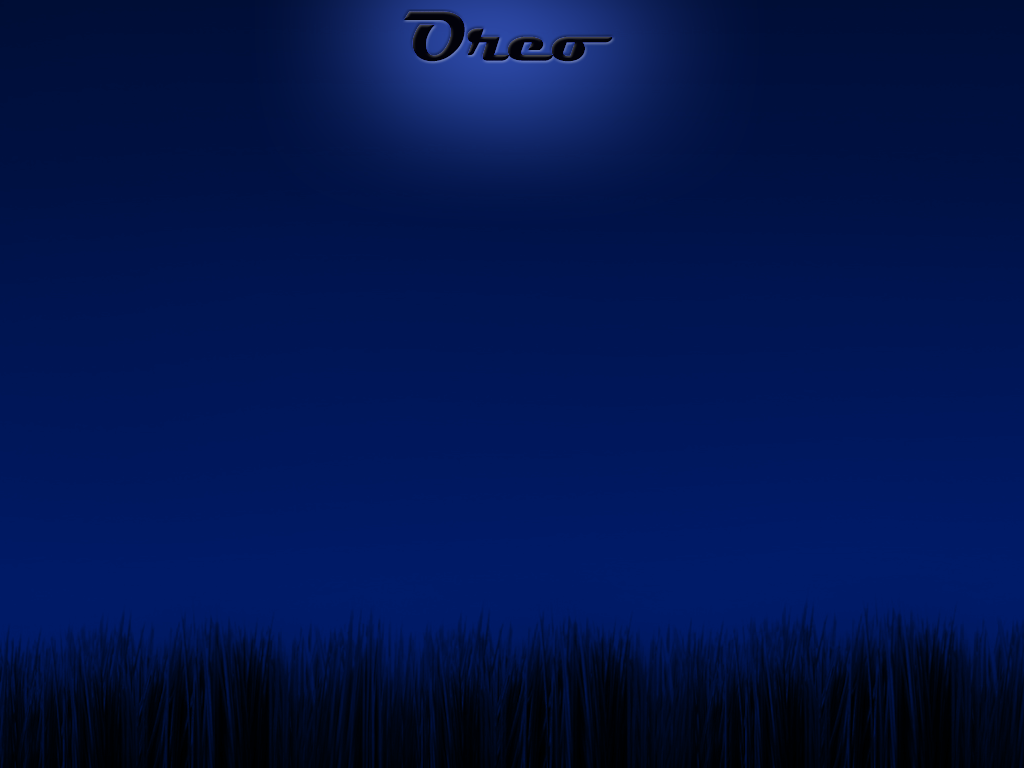
<style>
.page{position:relative;width:1024px;height:768px}
.page>*{position:absolute;margin:0}
.t1{font:72px "Magneto-Bold";color:#000000}
</style>
<div class="page">
<p class="t1" style="left:403px;top:11px;width:210px;height:51px">Oreo</p>
</div>
